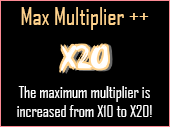
<style>
.page{position:relative;width:170px;height:127px;background:#000000}
.page>*{position:absolute;margin:0}
.t1{font:24px "AgencyFB-Reg";color:#ffd28c}
.t2{font:16px "AgencyFB-Reg";color:#ffffff}
</style>
<div class="page">
<p class="t1" style="left:21px;top:7px;width:128px;height:23px">Max Multiplier ++</p>
<p class="t2" style="left:17px;top:86px;width:135px;height:31px;text-align:center">The maximum multiplier is increased from X10 to X20!</p>
</div>
